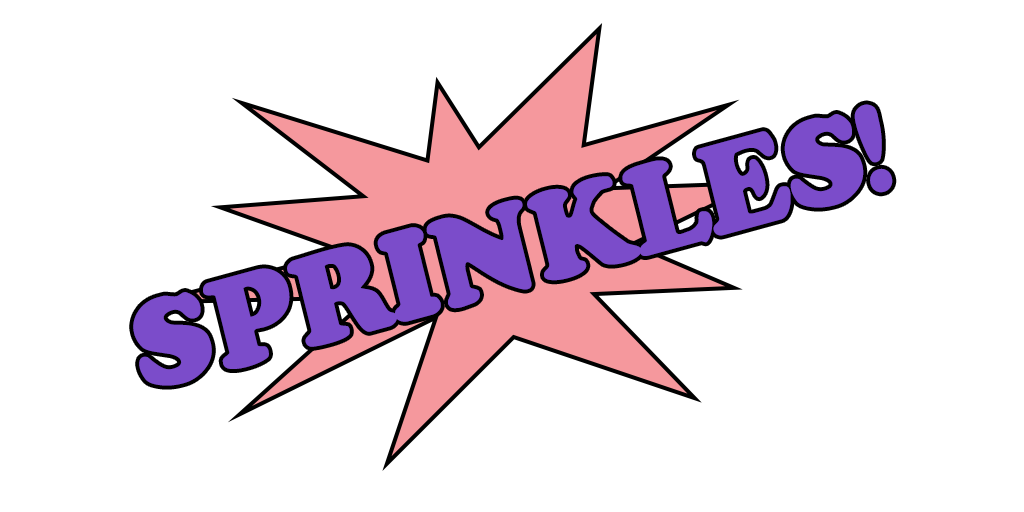
<style>
.page{position:relative;width:1024px;height:512px;background:#ffffff}
.page>*{position:absolute;margin:0}
.t1{font:111.1px "Coolsville";color:#7b4cca;scale:0.95 1}
</style>
<div class="page">
<p class="t1" style="left:133px;top:104px;width:760px;height:282px;rotate:-15deg">SPRINKLES!</p>
</div>
